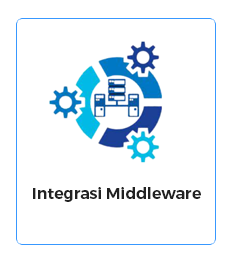
<style>
.page{position:relative;width:230px;height:271px;background:#ffffff}
.page>*{position:absolute;margin:0}
.t1{font:15.9px "Montserrat-SemiBold";color:#222222}
</style>
<div class="page">
<p class="t1" style="left:33px;top:187px;width:168px;height:15px">Integrasi Middleware</p>
</div>
